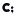
<style>
.page{position:relative;width:16px;height:16px;background:#ffffff}
.page>*{position:absolute;margin:0}
.t1{font:12px "BigJohn";letter-spacing:0.35em;color:#09090f}
.t2{font:14px "BigJohn";letter-spacing:0.35em;color:#09090f}
</style>
<div class="page">
<p class="t1" style="left:2px;top:3px;width:8px;height:9px">C</p>
<p class="t2" style="left:11px;top:6px;width:3px;height:8px">;</p>
</div>
